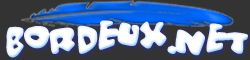
<style>
.page{position:relative;width:250px;height:60px;background:#333333}
.page>*{position:absolute;margin:0}
.t1{font:34.9px "Vitamin";color:#ffffff;scale:0.91 1}
</style>
<div class="page">
<p class="t1" style="left:6px;top:20px;width:242px;height:38px">Bordeux.NET</p>
</div>
